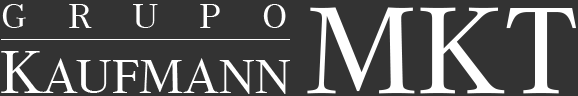
<style>
.page{position:relative;width:578px;height:96px;background:#333333}
.page>*{position:absolute;margin:0}
.t1{font:36px "CorporateA-Regular";letter-spacing:1.03em;color:#ffffff;scale:1.11 1}
.t2{font:127.2px "CorporateA-Regular";letter-spacing:-0.02em;color:#ffffff;scale:1.11 1}
.t3{font:50.3px "CorporateA-Regular";letter-spacing:-0.02em;color:#ffffff;scale:1.11 1}
.t4{font:62.9px "CorporateA-Regular";letter-spacing:-0.02em;color:#ffffff;scale:1.11 1}
</style>
<div class="page">
<p class="t1" style="left:2px;top:4px;width:284px;height:24px">GRUPO</p>
<p class="t2" style="left:307px;top:7px;width:269px;height:87px">MKT</p>
<p class="t3" style="left:1px;top:51px;width:289px;height:43px"><span class="t4">K</span>AUFMANN</p>
</div>
